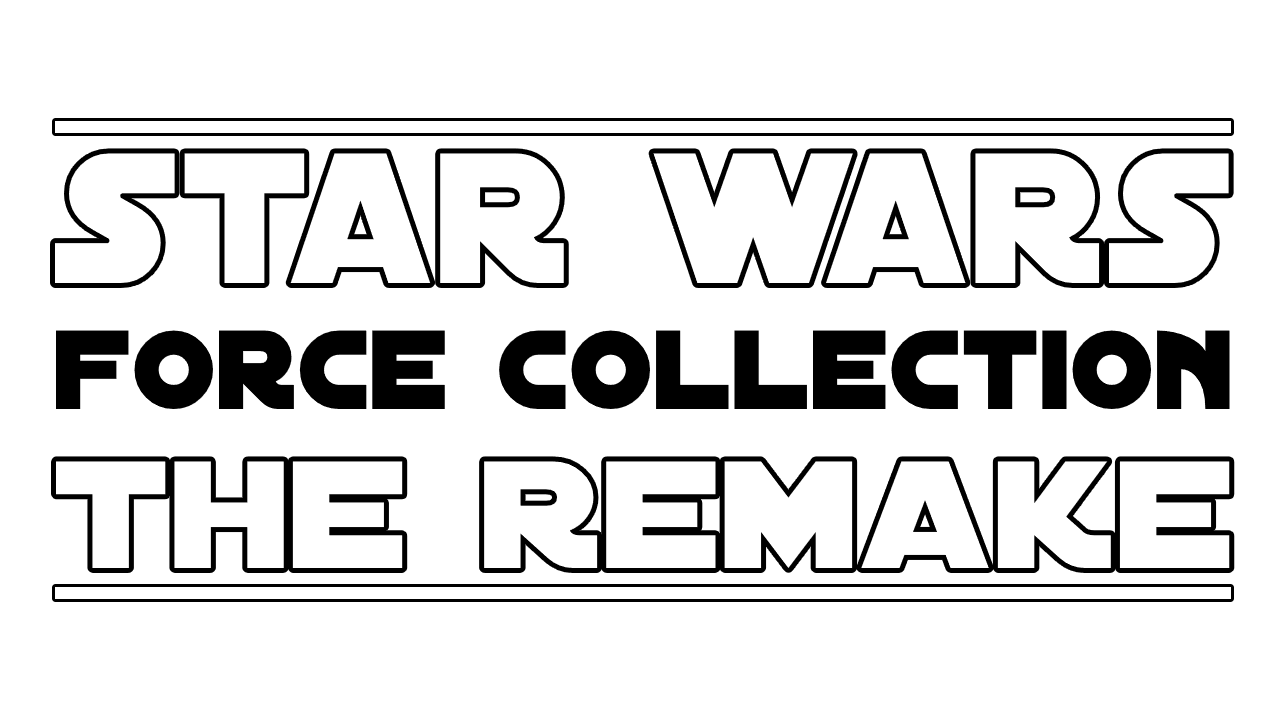
<style>
.page{position:relative;width:1280px;height:720px;background:#ffffff}
.page>*{position:absolute;margin:0}
.t1{font:199.4px "DistantGalaxy";color:#ffffff}
.t2{font:120.7px "DistantGalaxy";color:#000000}
.t3{font:164px "DistantGalaxy";color:#ffffff;scale:1.11 1}
</style>
<div class="page">
<p class="t1" style="left:55px;top:153px;width:1174px;height:130px">star wars</p>
<p class="t2" style="left:55px;top:330px;width:1175px;height:80px">force collection</p>
<p class="t3" style="left:55px;top:461px;width:1175px;height:108px">the remake</p>
</div>
